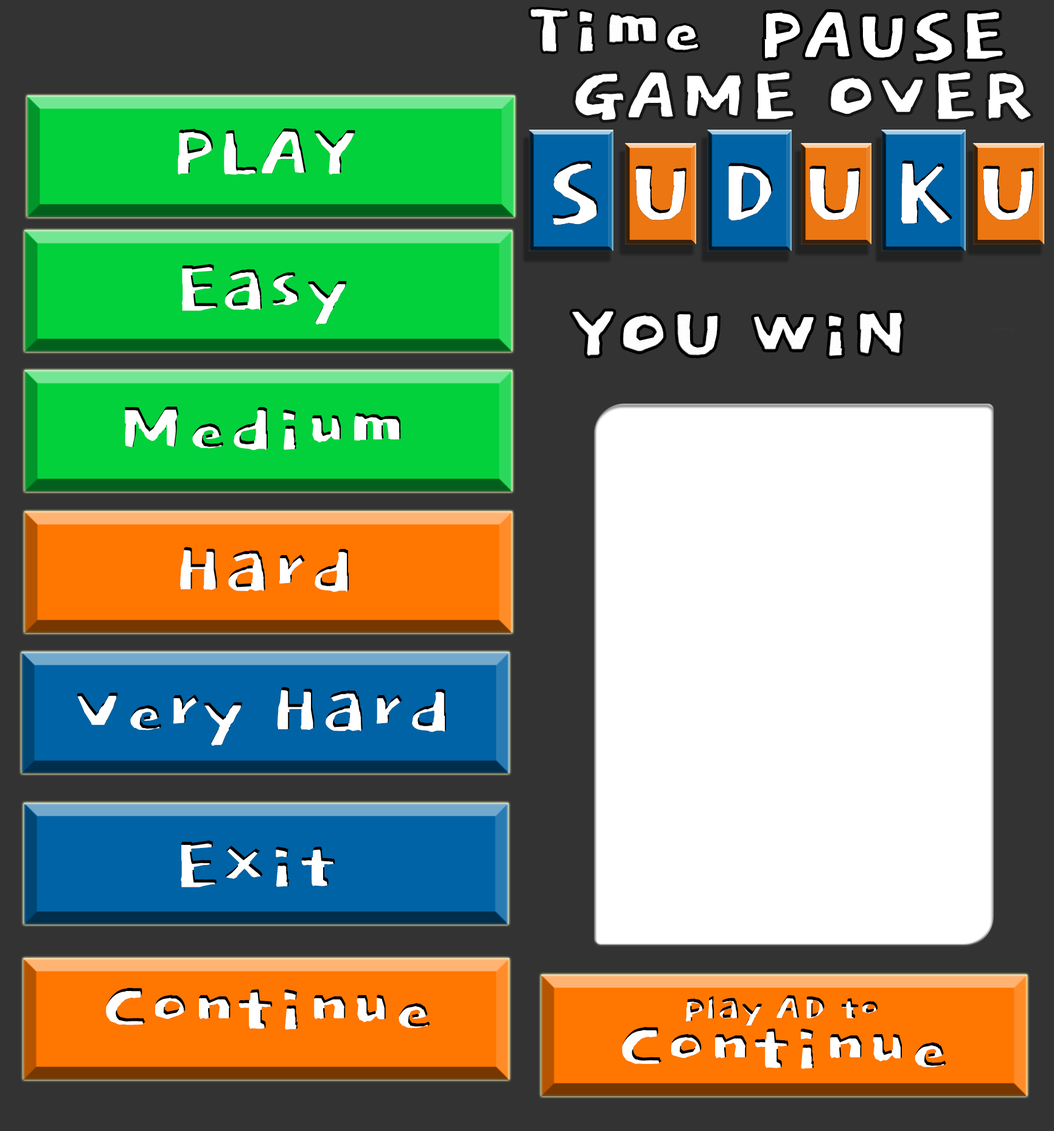
<style>
.page{position:relative;width:1054px;height:1131px;background:#333333}
.page>*{position:absolute;margin:0}
.t1{font:91.3px "Dokdo-Regular";color:#ffffff}
.t2{font:121.7px "Dokdo-Regular";letter-spacing:0.18em;color:#ffffff;scale:0.95 1}
.t3{font:4.2px "Dokdo-Regular";color:#3c3b3b}
.t4{font:46.4px/49.3px "Dokdo-Regular";color:#ffffff}
.t5{font:91.3px/49.3px "Dokdo-Regular";color:#ffffff}
</style>
<div class="page">
<p class="t1" style="left:531px;top:9px;width:167px;height:43px">Time</p>
<p class="t1" style="left:765px;top:12px;width:238px;height:49px">PAUSE</p>
<p class="t1" style="left:575px;top:72px;width:456px;height:48px">GAME OVER</p>
<p class="t1" style="left:177px;top:128px;width:178px;height:47px">PLAY</p>
<p class="t2" style="left:552px;top:160px;width:483px;height:65px">SUDUKU</p>
<p class="t1" style="left:181px;top:264px;width:166px;height:60px">Easy</p>
<p class="t1" style="left:572px;top:311px;width:330px;height:45px">YOU WiN</p>
<p class="t3" style="left:993px;top:328px;width:21px;height:3px">Lorem Ipsum</p>
<p class="t1" style="left:125px;top:407px;width:276px;height:43px">Medium</p>
<p class="t1" style="left:180px;top:547px;width:169px;height:45px">Hard</p>
<p class="t1" style="left:77px;top:687px;width:369px;height:59px">Very Hard</p>
<p class="t1" style="left:181px;top:840px;width:154px;height:48px">Exit</p>
<p class="t1" style="left:106px;top:988px;width:324px;height:42px">Continue</p>
<p class="t4" style="left:622px;top:995px;width:325px;height:74px;text-align:center">play AD to<br><span class="t5">Continue</span></p>
</div>
